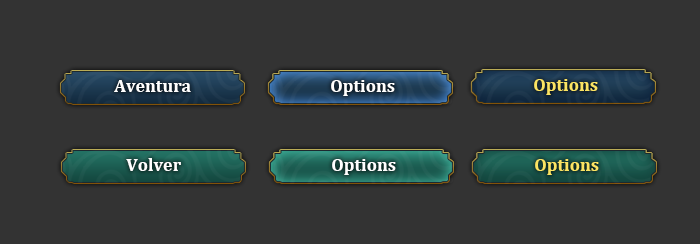
<style>
.page{position:relative;width:700px;height:244px;background:#333333}
.page>*{position:absolute;margin:0}
.t1{font:18px "Cambria-Bold";color:#ffffff}
.t2{font:18px "Cambria-Bold";color:#fbe463}
</style>
<div class="page">
<p class="t1" style="left:114px;top:80px;width:77px;height:12px">Aventura</p>
<p class="t1" style="left:331px;top:80px;width:64px;height:16px">Options</p>
<p class="t2" style="left:534px;top:79px;width:64px;height:16px">Options</p>
<p class="t1" style="left:126px;top:158px;width:55px;height:13px">Volver</p>
<p class="t1" style="left:332px;top:159px;width:64px;height:16px">Options</p>
<p class="t2" style="left:535px;top:159px;width:64px;height:16px">Options</p>
</div>
